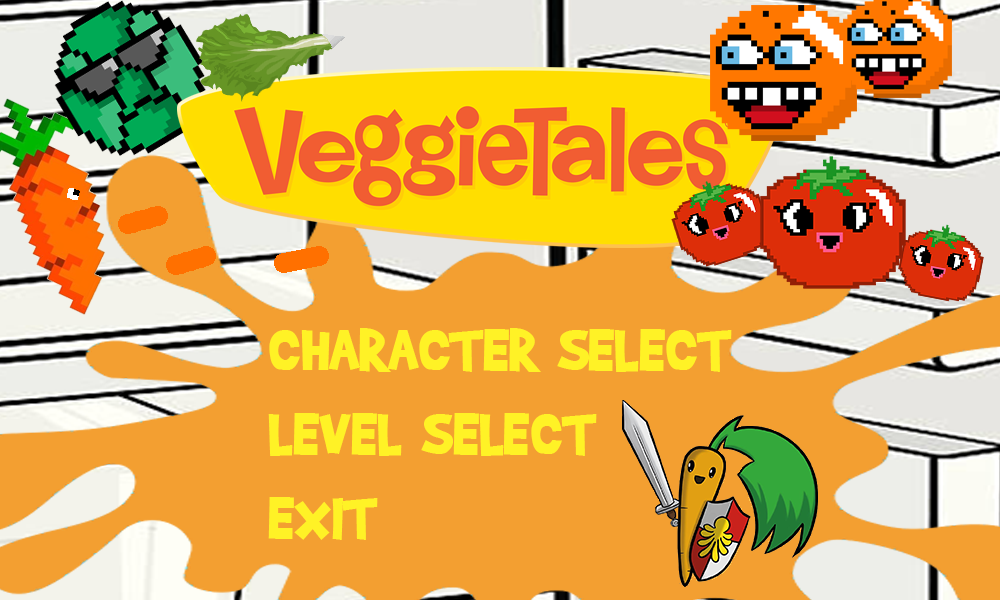
<style>
.page{position:relative;width:1000px;height:600px;background:#f39f31}
.page>*{position:absolute;margin:0}
.t1{font:70px "BradyBunchRemastered";color:#fff226}
</style>
<div class="page">
<p class="t1" style="left:268px;top:328px;width:464px;height:212px">CHARACTER SELECT<br>LEVEL SELECT<br>EXIT</p>
</div>
